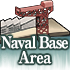
<style>
.page{position:relative;width:70px;height:70px;background:#ffffff}
.page>*{position:absolute;margin:0}
.t1{font:16px/15px "RyuminPro-ExBold";letter-spacing:-0.08em;color:#ffffff;scale:0.9 1}
.t2{font:16px/15px "RyuminPro-ExBold";letter-spacing:-0.04em;color:#ffffff;scale:0.9 1}
</style>
<div class="page">
<p class="t1" style="left:1px;top:36px;width:67px;height:28px;text-align:center">Naval Base<br><span class="t2">Area</span></p>
</div>
